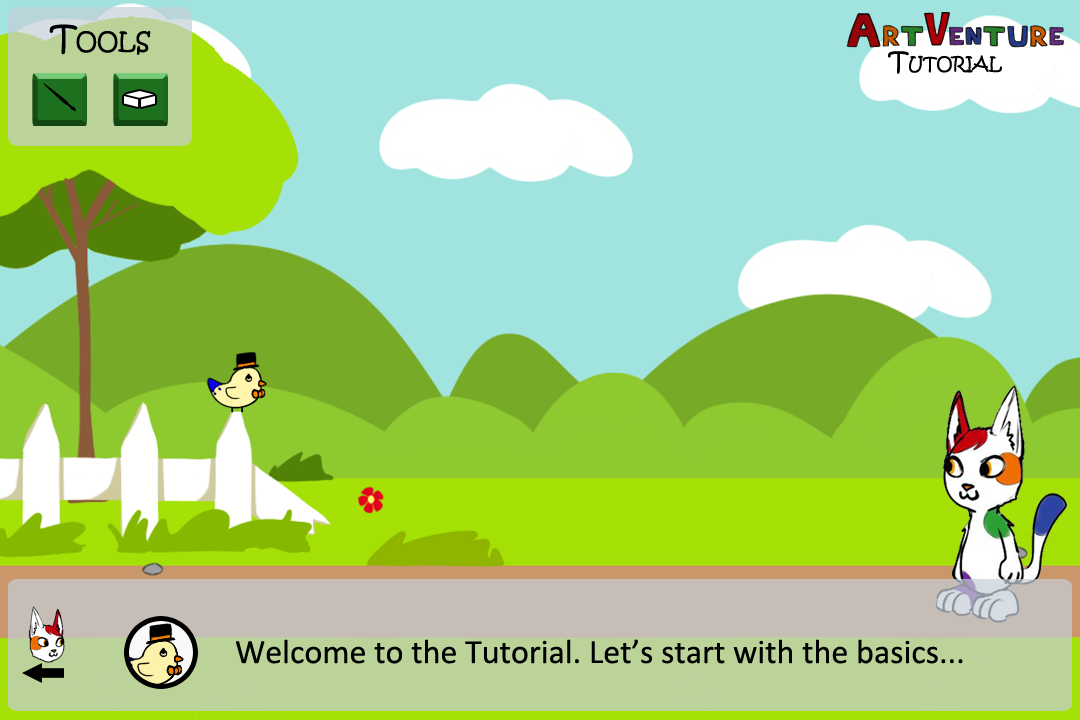
<style>
.page{position:relative;width:1080px;height:720px;background:#a1e4df}
.page>*{position:absolute;margin:0}
.t1{font:34px "KristenITC-Regular";color:#000000;font-variant:small-caps}
.t2{font:25.7px "KristenITC-Regular";color:#000000;font-variant:small-caps}
.t3{font:34px "Calibri";color:#000000}
</style>
<div class="page">
<p class="t1" style="left:49px;top:24px;width:102px;height:31px">Tools</p>
<p class="t2" style="left:888px;top:51px;width:114px;height:23px">Tutorial</p>
<p class="t3" style="left:236px;top:639px;width:727px;height:25px">Welcome to the Tutorial. Let’s start with the basics...</p>
</div>
